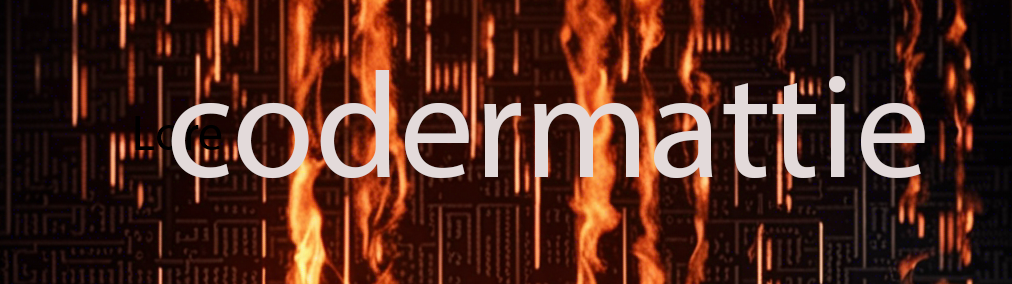
<style>
.page{position:relative;width:1012px;height:284px}
.page>*{position:absolute;margin:0}
.t1{font:150px "MyriadPro-Regular";color:#e3dada}
</style>
<div class="page">
<p class="t1" style="left:171px;top:70px;width:754px;height:109px">codermattie</p>
</div>
